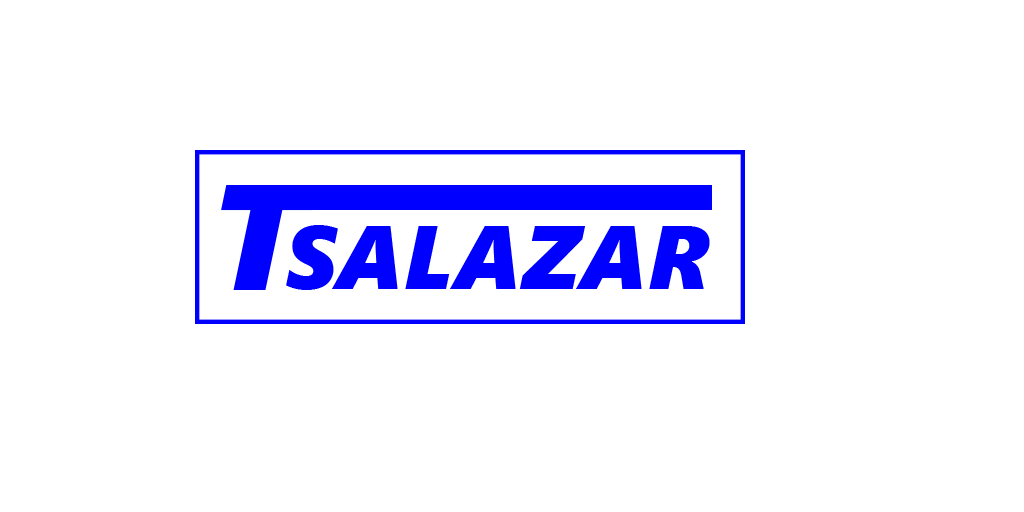
<style>
.page{position:relative;width:1024px;height:512px;background:#ffffff}
.page>*{position:absolute;margin:0}
.t1{font:150px "SegoeUIBlack-Italic";color:#0000ff}
.t2{font:90px "SegoeUIBlack-Italic";color:#0000ff}
</style>
<div class="page">
<p class="t1" style="left:221px;top:185px;width:97px;height:105px">T</p>
<p class="t2" style="left:286px;top:225px;width:424px;height:65px">SALAZAR</p>
</div>
